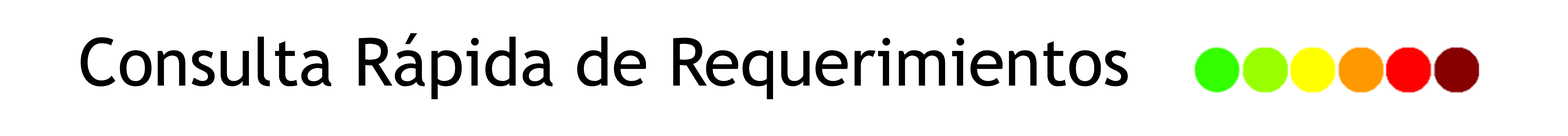
<style>
.page{position:relative;width:1568px;height:136px;background:#ffffff}
.page>*{position:absolute;margin:0}
.t1{font:66.4px "TrebuchetMS";color:#000000}
</style>
<div class="page">
<p class="t1" style="left:81px;top:33px;width:1047px;height:67px">Consulta Rápida de Requerimientos</p>
</div>
